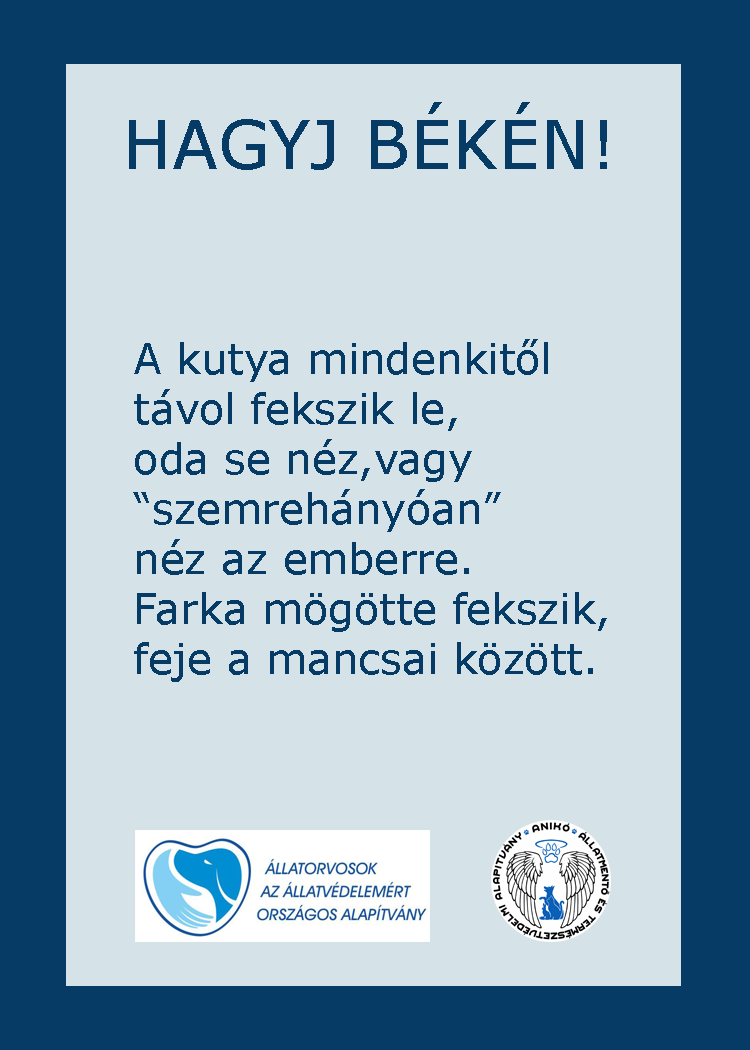
<style>
.page{position:relative;width:750px;height:1050px;background:#d5e2e7}
.page>*{position:absolute;margin:0}
.t1{font:66.7px "Verdana";color:#053b65}
.t2{font:66.7px "GravitateBRK";color:#053b65}
.t3{font:41.7px "Verdana";color:#053b65}
</style>
<div class="page">
<p class="t1" style="left:129px;top:102px;width:478px;height:68px"><span class="t2">         </span>HAGYJ BÉKÉN!</p>
<p class="t3" style="left:133px;top:339px;width:474px;height:343px">A kutya mindenkitől<br>távol fekszik le,<br>oda se néz,vagy<br>“szemrehányóan”<br>néz az emberre.<br>Farka mögötte fekszik,<br>feje a mancsai között.</p>
</div>
